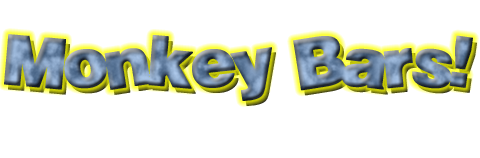
<style>
.page{position:relative;width:480px;height:158px;background:#ffffff}
.page>*{position:absolute;margin:0}
.t1{font:68px "Soopafresh";font-weight:bold}
</style>
<div class="page">
<p class="t1" style="left:4px;top:34px;width:469px;height:67px">Monkey Bars!</p>
</div>
